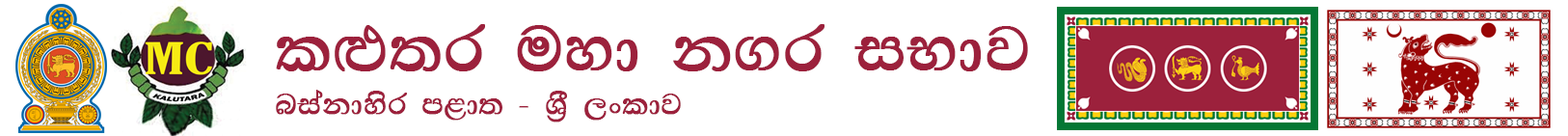
<style>
.page{position:relative;width:1568px;height:136px;background:#ffffff}
.page>*{position:absolute;margin:0}
.t1{font:75px "FMAbhayax";color:#9c213c;font-weight:bold}
.t2{font:34.8px "FMAbhayax";color:#9c213c;font-weight:bold}
</style>
<div class="page">
<p class="t1" style="left:276px;top:24px;width:752px;height:47px">l`M;r uyd k.r iNdj</p>
<p class="t2" style="left:276px;top:90px;width:405px;height:32px">niakdysr m&lt;d; - Y%S ,xldj</p>
</div>
